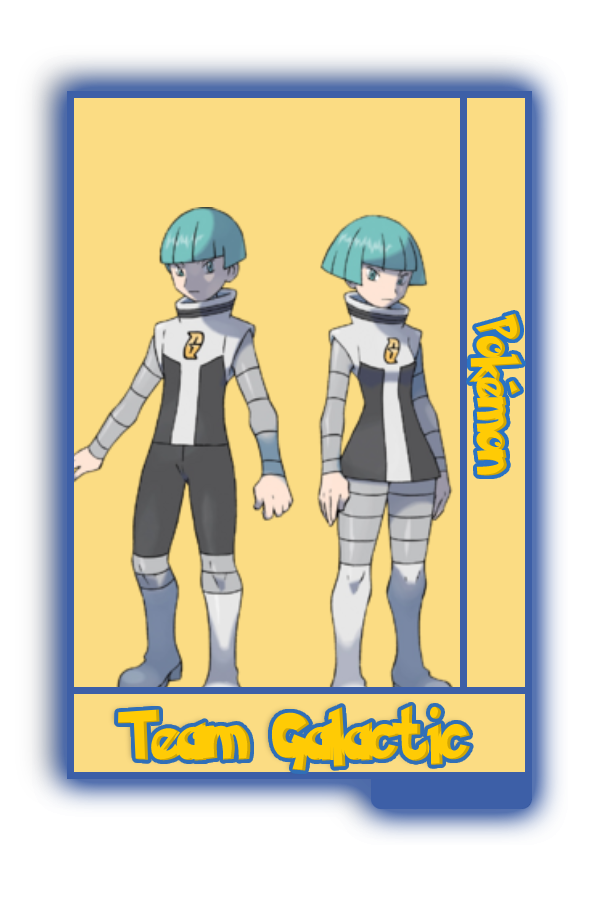
<style>
.page{position:relative;width:600px;height:900px;background:#fbdc83}
.page>*{position:absolute;margin:0}
.t1{font:48.8px "PokemonSolidNormal";color:#ffcb05;scale:0.8 1}
.t2{font:56.6px "PokemonSolidNormal";color:#ffcb05;scale:0.92 1}
</style>
<div class="page">
<p class="t1" style="left:469px;top:313px;width:54px;height:163px;rotate:90deg">Pokémon</p>
<p class="t2" style="left:118px;top:705px;width:352px;height:66px">Team Galactic</p>
</div>
